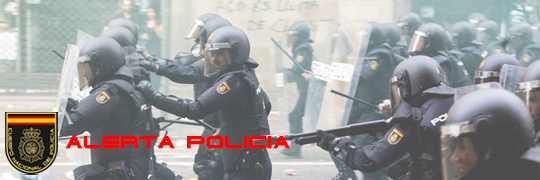
<style>
.page{position:relative;width:540px;height:180px}
.page>*{position:absolute;margin:0}
.t1{font:16px "TerminatorCyr4-Semi-expandedBold";color:#ff0101;font-weight:bold}
</style>
<div class="page">
<p class="t1" style="left:65px;top:136px;width:225px;height:13px">ALERTA POLICIA</p>
</div>
